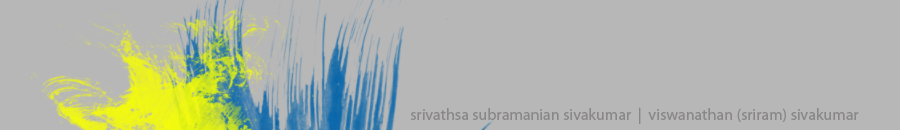
<style>
.page{position:relative;width:900px;height:130px;background:#b7b7b7}
.page>*{position:absolute;margin:0}
.t1{font:16px "MyriadPro-Regular";color:#898787}
</style>
<div class="page">
<p class="t1" style="left:410px;top:107px;width:449px;height:17px">srivathsa subramanian sivakumar  |  viswanathan (sriram) sivakumar</p>
</div>
